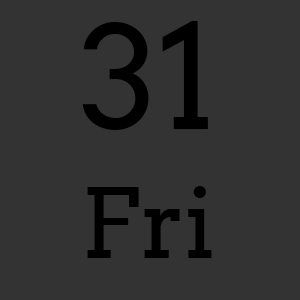
<style>
.page{position:relative;width:300px;height:300px;background:#333333}
.page>*{position:absolute;margin:0}
.t1{font:142.1px "Arvo";color:#000000}
.t2{font:95.8px "Arvo";color:#000000}
</style>
<div class="page">
<p class="t1" style="left:82px;top:21px;width:126px;height:109px">31</p>
<p class="t2" style="left:87px;top:186px;width:125px;height:72px">Fri</p>
</div>
